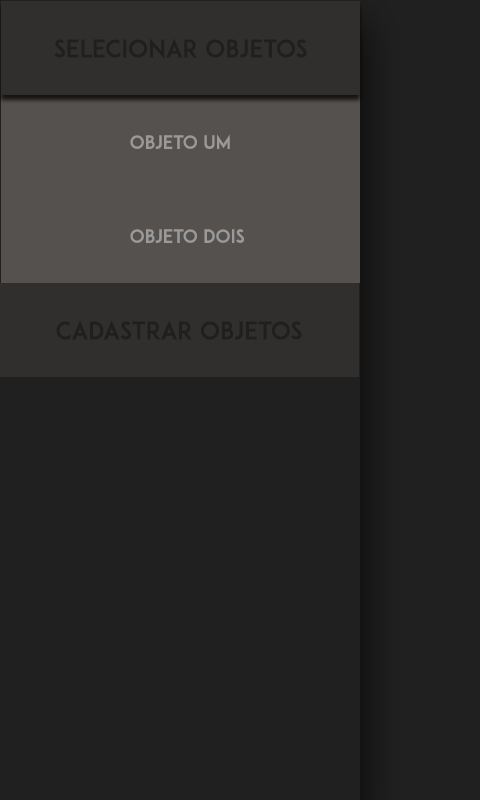
<style>
.page{position:relative;width:480px;height:800px;background:#212020}
.page>*{position:absolute;margin:0}
.t1{font:24px "ADAM.CGPRO";color:#201f1f}
.t2{font:18px "ADAM.CGPRO";color:#9a9a9a}
</style>
<div class="page">
<p class="t1" style="left:54px;top:38px;width:253px;height:21px">selecionar objetos</p>
<p class="t2" style="left:130px;top:134px;width:100px;height:15px">OBJETO uM</p>
<p class="t2" style="left:130px;top:229px;width:114px;height:14px">OBJETO DOIS</p>
<p class="t1" style="left:56px;top:320px;width:246px;height:20px">CADASTRAR objetos</p>
</div>
